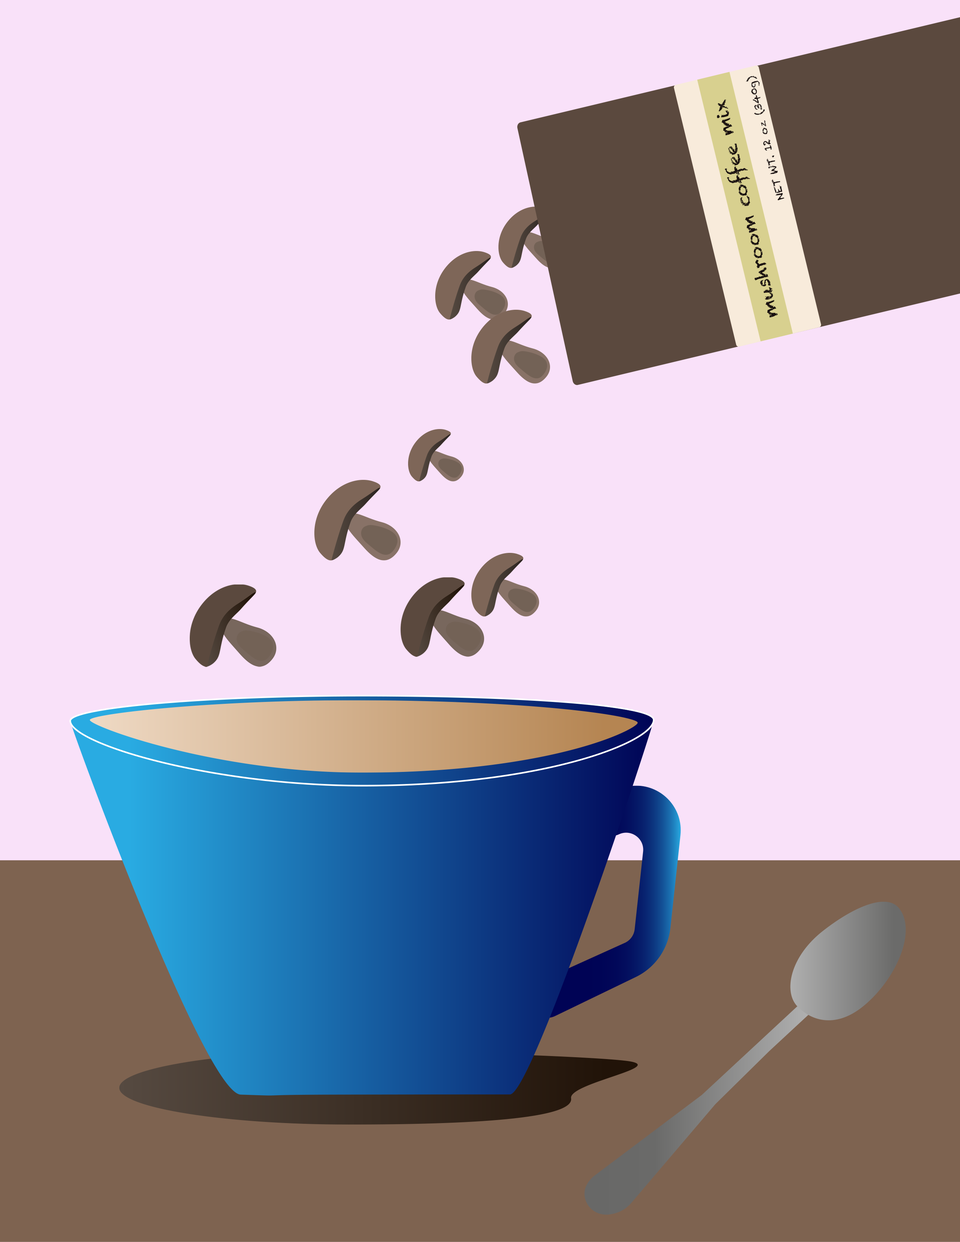
<style>
.page{position:relative;width:960px;height:1242px;background:#f9e1f9}
.page>*{position:absolute;margin:0}
.t1{font:10.2px "Chalkduster";color:#191010}
.t2{font:17.9px "Chalkduster";color:#191010}
</style>
<div class="page">
<p class="t1" style="left:746px;top:76px;width:38px;height:124px;rotate:-104deg">NET WT. 12 oz  (340g)</p>
<p class="t2" style="left:717px;top:99px;width:61px;height:219px;rotate:-104deg">mushroom coffee mix</p>
</div>
